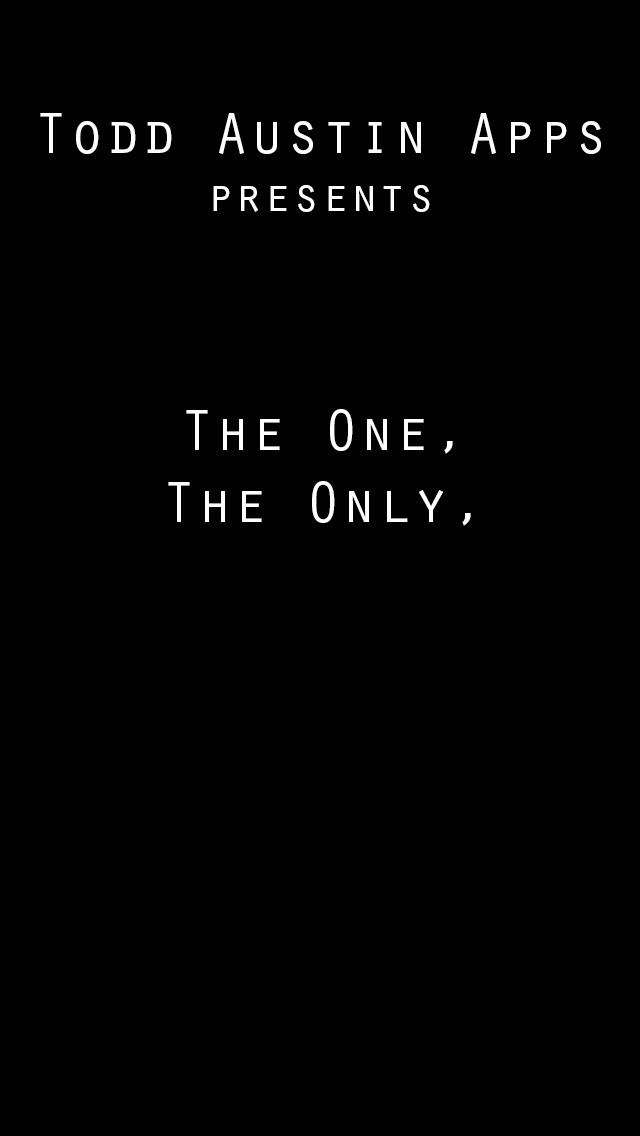
<style>
.page{position:relative;width:640px;height:1136px;background:#010101}
.page>*{position:absolute;margin:0}
.t1{font:60px "OratorStd";color:#fefefd}
.t2{font:48px "OratorStd";color:#fefefd}
</style>
<div class="page">
<p class="t1" style="left:40px;top:113px;width:561px;height:99px;text-align:center">Todd Austin Apps<br><span class="t2">presents</span></p>
<p class="t1" style="left:186px;top:409px;width:267px;height:45px">The One,</p>
<p class="t1" style="left:168px;top:481px;width:303px;height:45px">The Only,</p>
</div>
